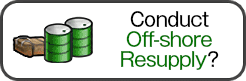
<style>
.page{position:relative;width:246px;height:81px;background:#ffffff}
.page>*{position:absolute;margin:0}
.t1{font:20px/20px "GothicMB101Pro-Regular";letter-spacing:-0.04em;color:#037302}
.t2{font:20px/20px "GothicMB101Pro-Regular";letter-spacing:-0.04em;color:#000000}
</style>
<div class="page">
<p class="t1" style="left:121px;top:11px;width:98px;height:59px;text-align:center"><span class="t2">Conduct<br></span>Off-shore<br>Resupply<span class="t2">?</span></p>
</div>
